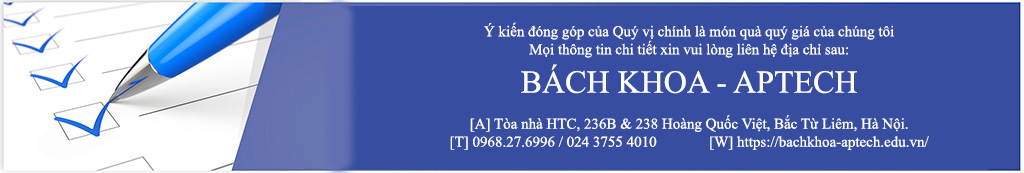
<style>
.page{position:relative;width:1024px;height:173px;background:#374da2}
.page>*{position:absolute;margin:0}
.t1{font:15px "TimesNewRomanPSMT";color:#ffffff}
.t2{font:32px "TimesNewRomanPSMT";color:#ffffff}
</style>
<div class="page">
<p class="t1" style="left:450px;top:22px;width:479px;height:128px;text-align:center">Ý kiến đóng góp của Quý vị chính là món quà quý giá của chúng tôi<br>Mọi thông tin chi tiết xin vui lòng liên hệ địa chỉ sau:<br><span class="t2">BÁCH KHOA - APTECH<br></span><br>[A] Tòa nhà HTC, 236B &amp; 238 Hoàng Quốc Việt, Bắc Từ Liêm, Hà Nội.<br>[T] 0968.27.6996 / 024 3755 4010              [W] https://bachkhoa-aptech.edu.vn/</p>
</div>
